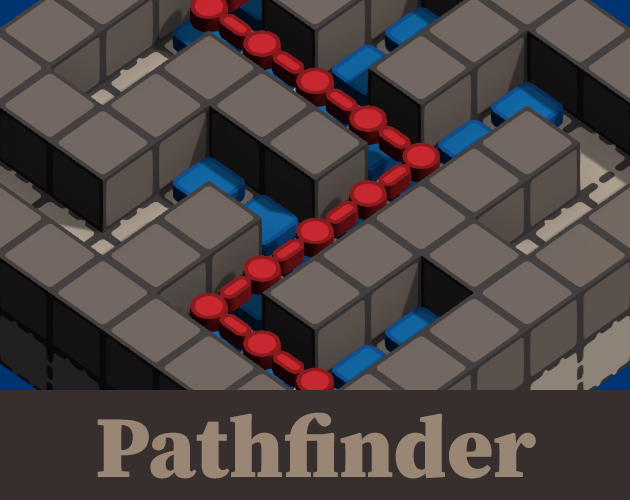
<style>
.page{position:relative;width:630px;height:500px;background:#736861}
.page>*{position:absolute;margin:0}
.t1{font:88px "SourceSerifRoman-Black";color:#998675}
</style>
<div class="page">
<p class="t1" style="left:97px;top:412px;width:439px;height:67px">Pathfinder</p>
</div>
